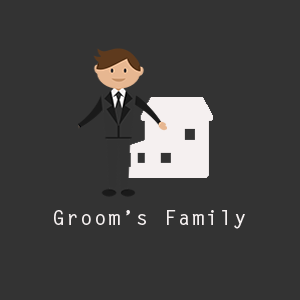
<style>
.page{position:relative;width:300px;height:300px;background:#333333}
.page>*{position:absolute;margin:0}
.t1{font:20.6px "LetterGothicStd-Bold";letter-spacing:0.075em;color:#f5f0f0}
</style>
<div class="page">
<p class="t1" style="left:54px;top:210px;width:191px;height:19px">Groom’s Family</p>
</div>
